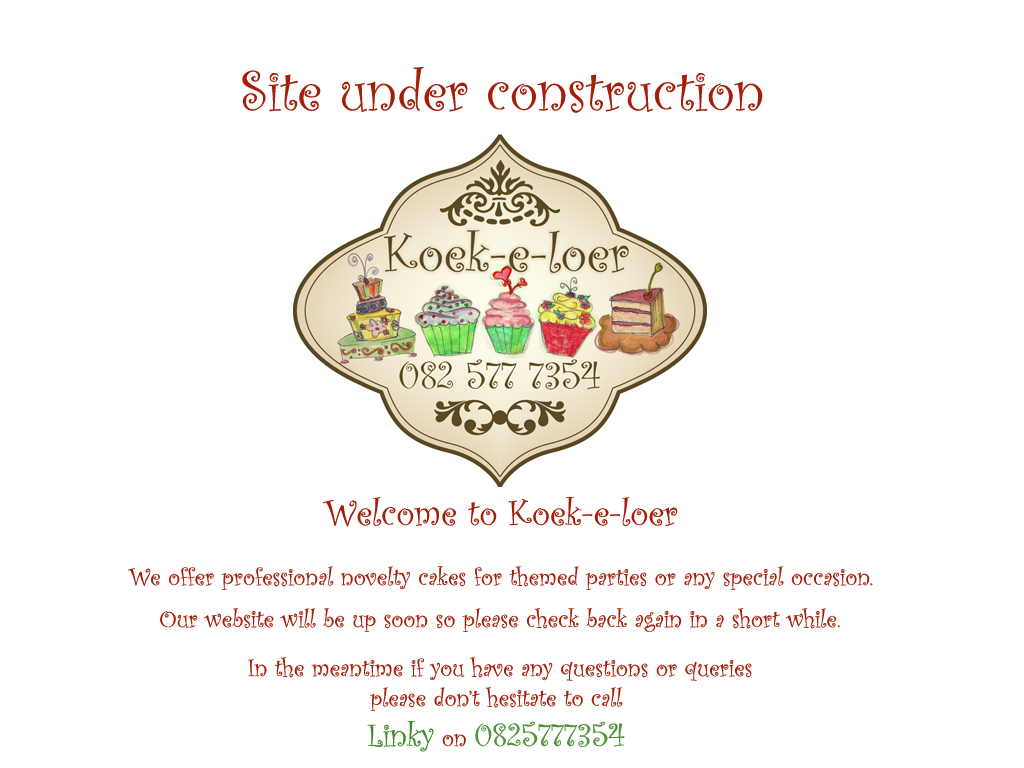
<style>
.page{position:relative;width:1024px;height:768px;background:#ffffff}
.page>*{position:absolute;margin:0}
.t1{font:58.3px "CurlzMT";color:#a41f0a}
.t2{font:25px "CurlzMT";color:#a41f0a}
.t3{font:37.5px "CurlzMT";color:#a41f0a}
</style>
<div class="page">
<p class="t1" style="left:242px;top:66px;width:521px;height:47px">Site under construction</p>
<p class="t2" style="left:127px;top:496px;width:746px;height:94px;text-align:center"><span class="t3">Welcome to Koek-e-loer<br></span><br>We offer professional novelty cakes for themed parties or any special occasion.</p>
<p class="t2" style="left:160px;top:607px;width:680px;height:25px">Our website will be up soon so please check back again in a short while.</p>
</div>
